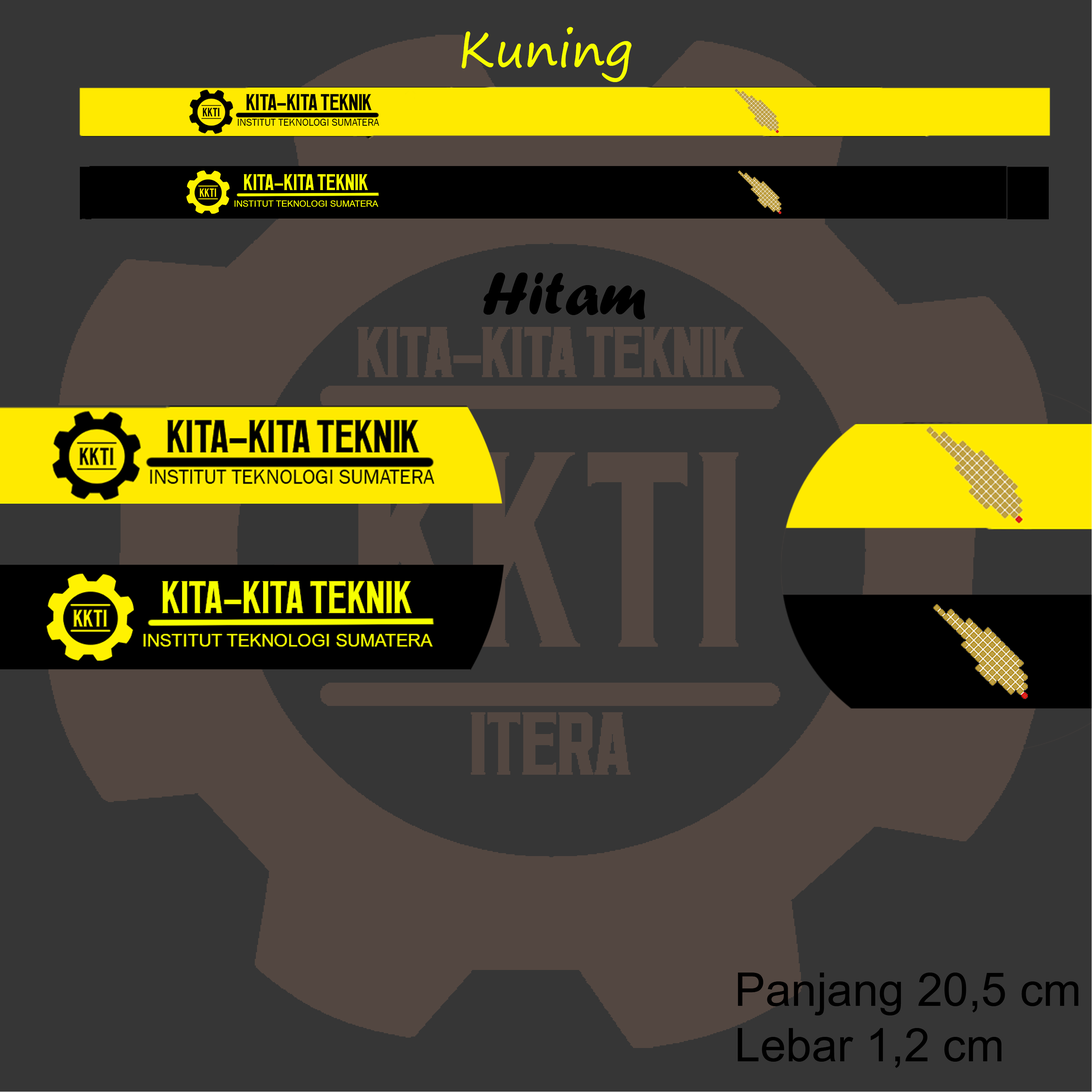
<style>
.page{position:relative;width:1092px;height:1092px;background:#363636}
.page>*{position:absolute;margin:0}
.t1{font:49.3px "SegoePrint";color:#f6ff00}
.t2{font:16.9px "FRITCH";color:#f6ff00}
.t3{font:8.8px "ArialMT";color:#f6ff00}
.t4{font:61.6px "ForteMT";color:#000000}
.t5{font:46.2px "ArialMT";color:#000000}
</style>
<div class="page">
<p class="t1" style="left:461px;top:27px;width:171px;height:55px">Kuning</p>
<p class="t2" style="left:244px;top:174px;width:124px;height:16px">KITA-KITA TEKNIK</p>
<p class="t3" style="left:234px;top:200px;width:144px;height:7px">INSTITUT TEKNOLOGI SUMATERA</p>
<p class="t4" style="left:483px;top:273px;width:162px;height:46px">Hitam</p>
<p class="t5" style="left:738px;top:973px;width:340px;height:95px">Panjang 20,5 cm<br>Lebar 1,2 cm</p>
</div>
